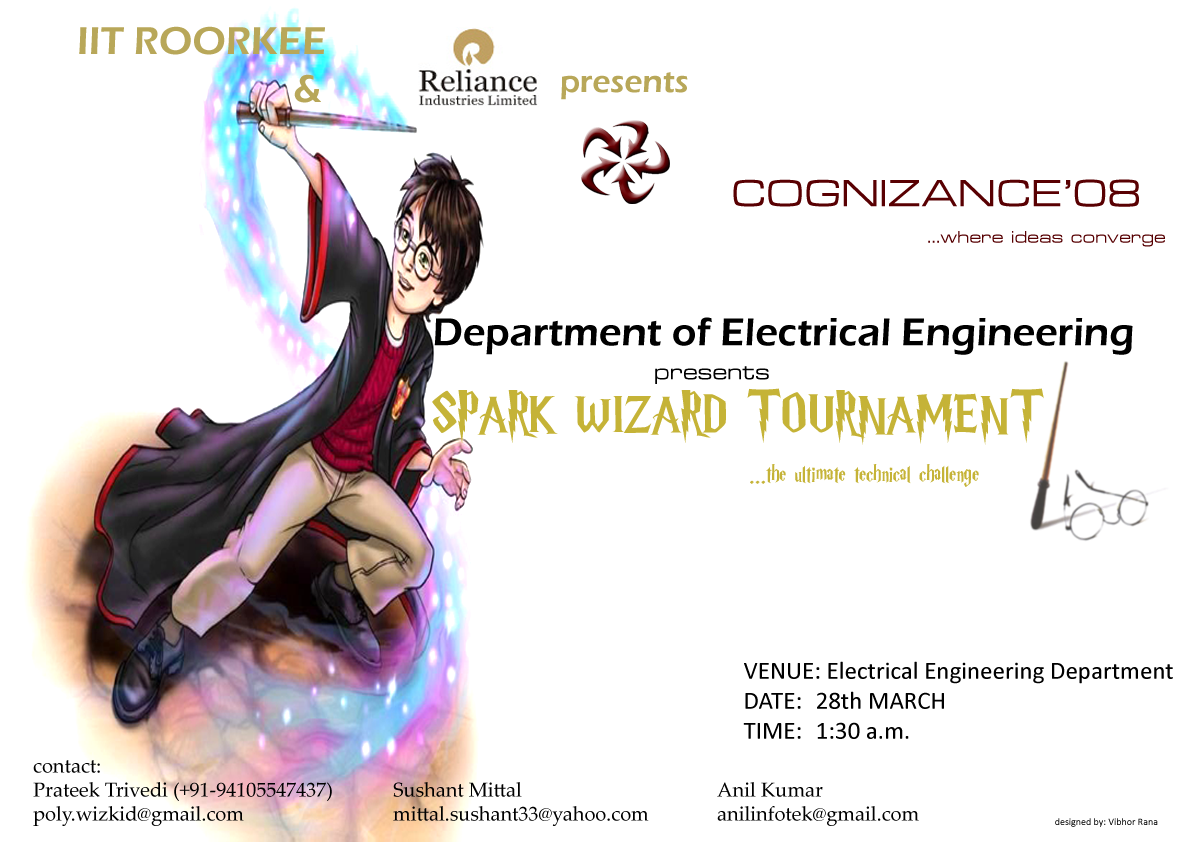
<style>
.page{position:relative;width:1191px;height:842px;background:#ffffff}
.page>*{position:absolute;margin:0}
.t1{font:40px "ErasITC-Demi";color:#b8a759}
.t2{font:32px "ErasITC-Demi";color:#b8a759}
.t3{font:45px "MetrostyleExtended-Regular";color:#590002}
.t4{font:20px "MetrostyleExtended-Regular";color:#570002}
.t5{font:40px "ErasITC-Demi";color:#000000}
.t6{font:25px "MetrostyleExtended-Regular";color:#000000}
.t7{font:55px "HarryP";color:#c5b337}
.t8{font:25px "HarryP";color:#c5b337}
.t9{font:25px "Calibri";color:#000000}
.t10{font:20px "PalatinoLinotype-Roman";color:#000000}
.t11{font:10px "Calibri"}
</style>
<div class="page">
<p class="t1" style="left:79px;top:26px;width:246px;height:77px">IIT ROORKEE<br>      &amp;</p>
<p class="t2" style="left:561px;top:72px;width:127px;height:28px">presents</p>
<p class="t3" style="left:733px;top:179px;width:406px;height:28px">COGNIZANCE’08</p>
<p class="t4" style="left:928px;top:231px;width:237px;height:16px">...where ideas converge</p>
<p class="t5" style="left:434px;top:317px;width:699px;height:38px">Department of Electrical Engineering</p>
<p class="t6" style="left:655px;top:366px;width:114px;height:18px">presents</p>
<p class="t7" style="left:432px;top:388px;width:612px;height:57px">SPARK WIZARD TOURNAMENT</p>
<p class="t8" style="left:750px;top:464px;width:229px;height:23px">...the ultimate technical challenge</p>
<p class="t9" style="left:743px;top:661px;width:430px;height:78px">VENUE: Electrical Engineering Department<br>DATE: 28th MARCH<br>TIME: 1:30 a.m.</p>
<p class="t10" style="left:33px;top:760px;width:886px;height:66px">contact:<br>Prateek Trivedi (+91-94105547437)  Sushant Mittal      Anil Kumar<br>poly.wizkid@gmail.com     mittal.sushant33@yahoo.com   anilinfotek@gmail.com</p>
<p class="t11" style="left:1055px;top:818px;width:103px;height:9px">designed by: Vibhor Rana</p>
</div>
